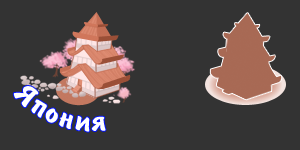
<style>
.page{position:relative;width:300px;height:150px;background:#333333}
.page>*{position:absolute;margin:0}
.t1{font:30px "BrushType-Bold";letter-spacing:0.05em;color:#ffffff}
</style>
<div class="page">
<p class="t1" style="left:13px;top:86px;width:93px;height:46px;rotate:20deg">ßïîíèÿ</p>
</div>
